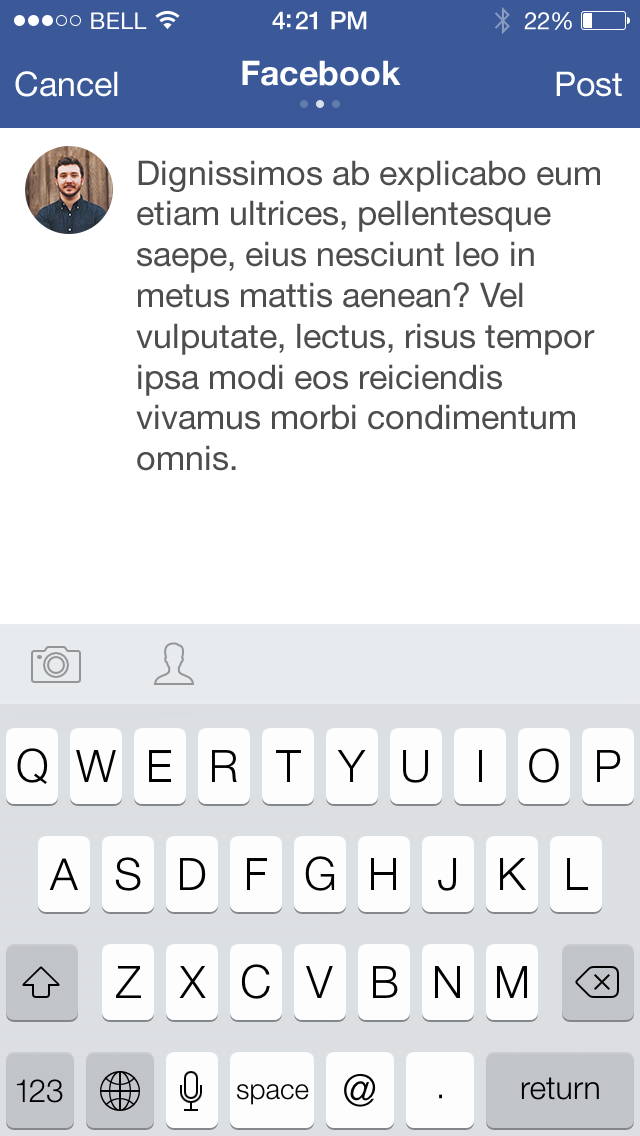
<style>
.page{position:relative;width:640px;height:1136px;background:#ffffff}
.page>*{position:absolute;margin:0}
.t1{font:23px "HelveticaNeue";letter-spacing:0.02em;color:#ffffff}
.t2{font:25px "HelveticaNeue-Medium";letter-spacing:-0.02em;color:#ffffff}
.t3{font:24px "HelveticaNeue";letter-spacing:-0.02em;color:#ffffff}
.t4{font:34px "HelveticaNeue-Bold";color:#ffffff}
.t5{font:34px "HelveticaNeue";color:#ffffff}
.t6{font:34px "HelveticaNeue";color:#4d4d4d}
</style>
<div class="page">
<p class="t1" style="left:91px;top:12px;width:56px;height:17px">BELL</p>
<p class="t2" style="left:272px;top:11px;width:95px;height:19px">4:21 PM</p>
<p class="t3" style="left:524px;top:12px;width:48px;height:18px">22%</p>
<p class="t4" style="left:242px;top:60px;width:159px;height:26px">Facebook</p>
<p class="t5" style="left:15px;top:71px;width:103px;height:26px">Cancel</p>
<p class="t5" style="left:556px;top:71px;width:66px;height:26px">Post</p>
<p class="t6" style="left:136px;top:160px;width:464px;height:311px">Dignissimos ab explicabo eum<br>etiam ultrices, pellentesque <br>saepe, eius nesciunt leo in <br>metus mattis aenean? Vel <br>vulputate, lectus, risus tempor <br>ipsa modi eos reiciendis <br>vivamus morbi condimentum <br>omnis.</p>
</div>
